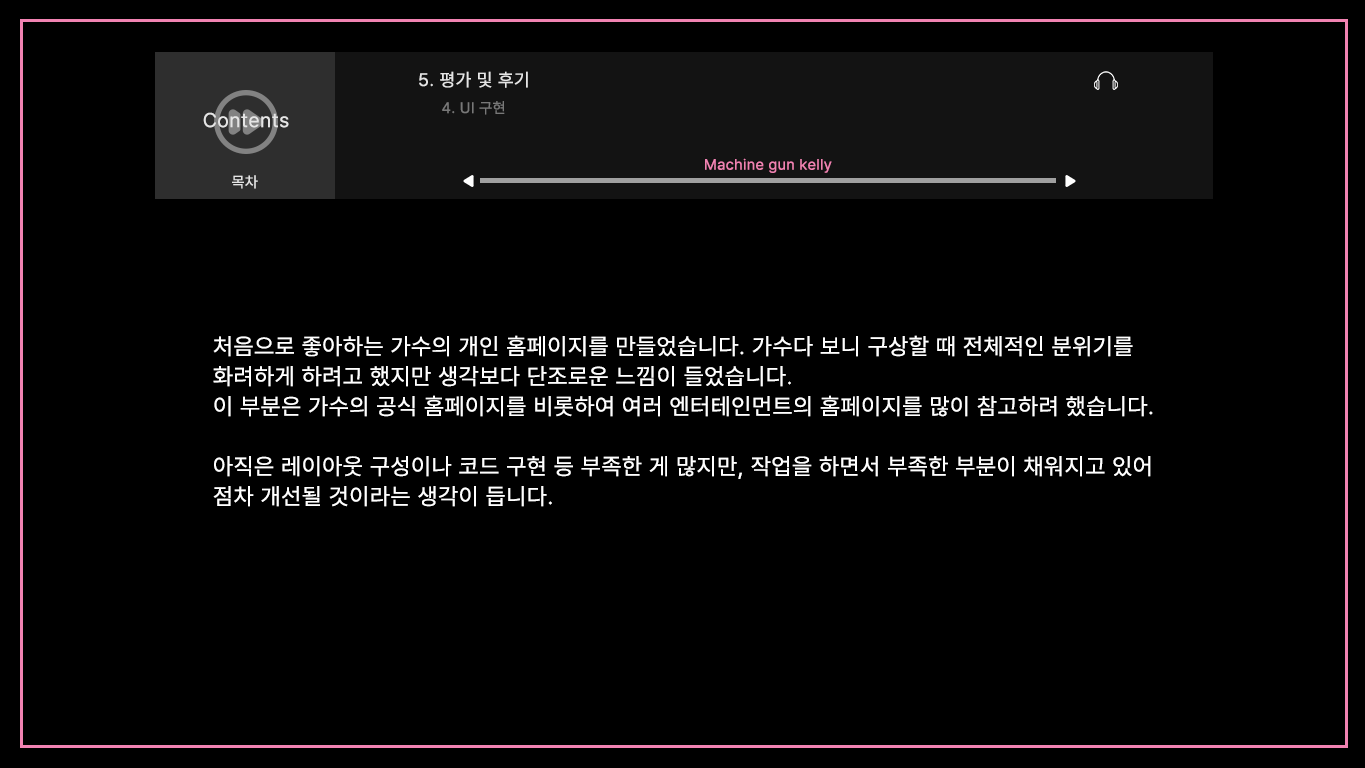
<style>
.page{position:relative;width:1365px;height:768px;background:#000000}
.page>*{position:absolute;margin:0}
.t1{font:18px "Pretendard-Regular";letter-spacing:0.03em;color:#e5e5e5}
.t2{font:15px "Pretendard-Regular";letter-spacing:0.03em;color:#787878}
.t3{font:20px "Pretendard-Regular";letter-spacing:0.03em;color:#e5e5e5}
.t4{font:15px "Pretendard-Regular";letter-spacing:0.03em;color:#f183b2}
.t5{font:15px "Pretendard-Regular";letter-spacing:0.03em;color:#e5e5e5}
.t6{font:23px/30px "Pretendard-Regular";letter-spacing:0.03em;color:#ffffff}
</style>
<div class="page">
<p class="t1" style="left:419px;top:71px;width:109px;height:17px">5. 평가 및 후기</p>
<p class="t2" style="left:442px;top:101px;width:63px;height:14px">4. UI 구현</p>
<p class="t3" style="left:203px;top:112px;width:86px;height:16px">Contents</p>
<p class="t4" style="left:705px;top:158px;width:127px;height:15px">Machine gun kelly</p>
<p class="t5" style="left:232px;top:175px;width:26px;height:14px">목차</p>
<p class="t6" style="left:213px;top:335px;width:940px;height:172px">처음으로 좋아하는 가수의 개인 홈페이지를 만들었습니다. 가수다 보니 구상할 때 전체적인 분위기를<br>화려하게 하려고 했지만 생각보다 단조로운 느낌이 들었습니다.<br>이 부분은 가수의 공식 홈페이지를 비롯하여 여러 엔터테인먼트의 홈페이지를 많이 참고하려 했습니다. <br><br>아직은 레이아웃 구성이나 코드 구현 등 부족한 게 많지만, 작업을 하면서 부족한 부분이 채워지고 있어<br>점차 개선될 것이라는 생각이 듭니다.</p>
</div>
